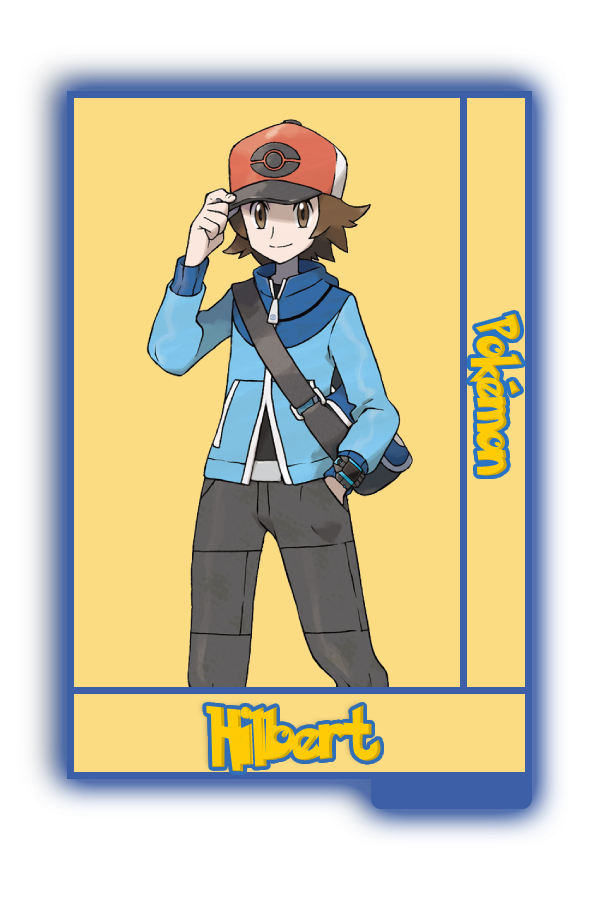
<style>
.page{position:relative;width:600px;height:900px;background:#fbdc83}
.page>*{position:absolute;margin:0}
.t1{font:48.8px "PokemonSolidNormal";color:#ffcb05;scale:0.8 1}
.t2{font:56.6px "PokemonSolidNormal";color:#ffcb05;scale:0.92 1}
</style>
<div class="page">
<p class="t1" style="left:469px;top:313px;width:54px;height:163px;rotate:90deg">Pokémon</p>
<p class="t2" style="left:206px;top:705px;width:175px;height:67px">Hilbert</p>
</div>
